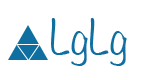
<style>
.page{position:relative;width:146px;height:80px;background:#ffffff}
.page>*{position:absolute;margin:0}
.t1{font:42px "Noteworthy-Light";color:#0f6fa1}
</style>
<div class="page">
<p class="t1" style="left:51px;top:18px;width:76px;height:48px">LgLg</p>
</div>
